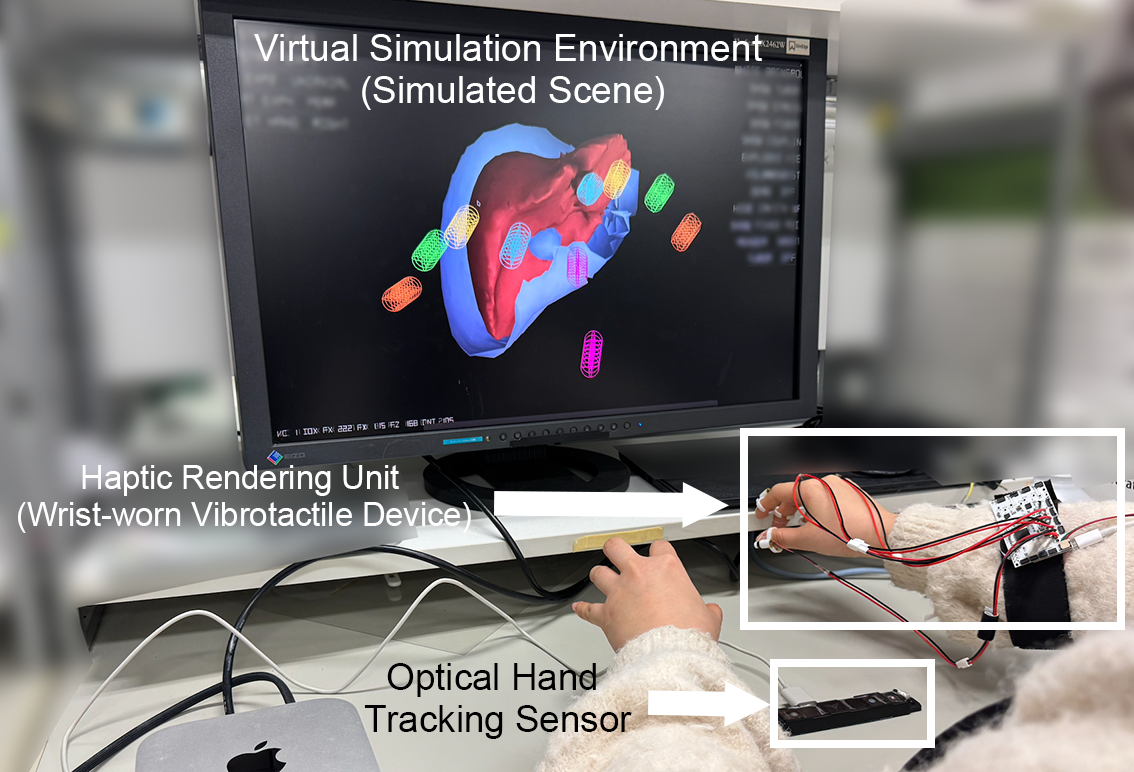
<style>
.page{position:relative;width:1134px;height:772px}
.page>*{position:absolute;margin:0}
.t1{font:37.2px/42.2px "ArialMT";color:#ffffff}
.t2{font:32.6px/37px "ArialMT";color:#fefefe}
.t3{font:36.8px/41.7px "ArialMT";color:#000000}
</style>
<div class="page">
<p class="t1" style="left:254px;top:34px;width:508px;height:76px;text-align:center">Virtual Simulation Environment<br> (Simulated Scene)</p>
<p class="t2" style="left:18px;top:465px;width:453px;height:68px;text-align:center">Haptic Rendering Unit <br>(Wrist-worn Vibrotactile Device)</p>
<p class="t3" style="left:364px;top:663px;width:268px;height:76px;text-align:center">Optical Hand <br>Tracking Sensor</p>
</div>
